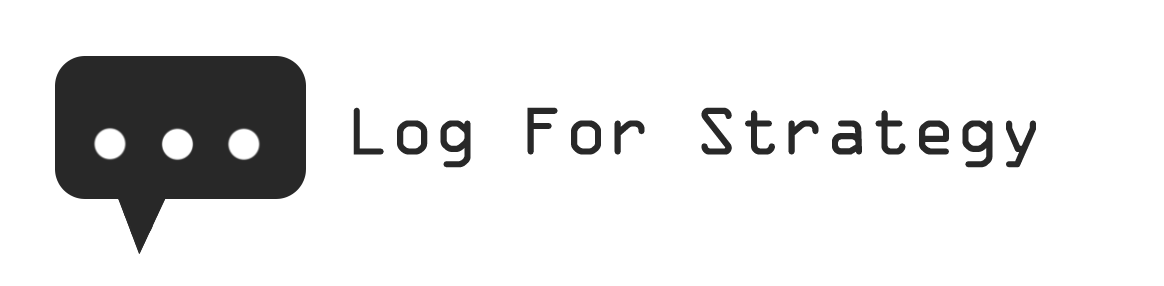
<style>
.page{position:relative;width:1164px;height:286px;background:#ffffff}
.page>*{position:absolute;margin:0}
.t1{font:72px "OCRAExtended";color:#282828}
</style>
<div class="page">
<p class="t1" style="left:353px;top:107px;width:683px;height:61px">Log For Strategy</p>
</div>
